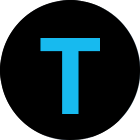
<style>
.page{position:relative;width:140px;height:140px;background:#000000}
.page>*{position:absolute;margin:0}
.t1{font:100px "MicrosoftYaHei";color:#17baef}
</style>
<div class="page">
<p class="t1" style="left:40px;top:38px;width:60px;height:76px">T</p>
</div>
